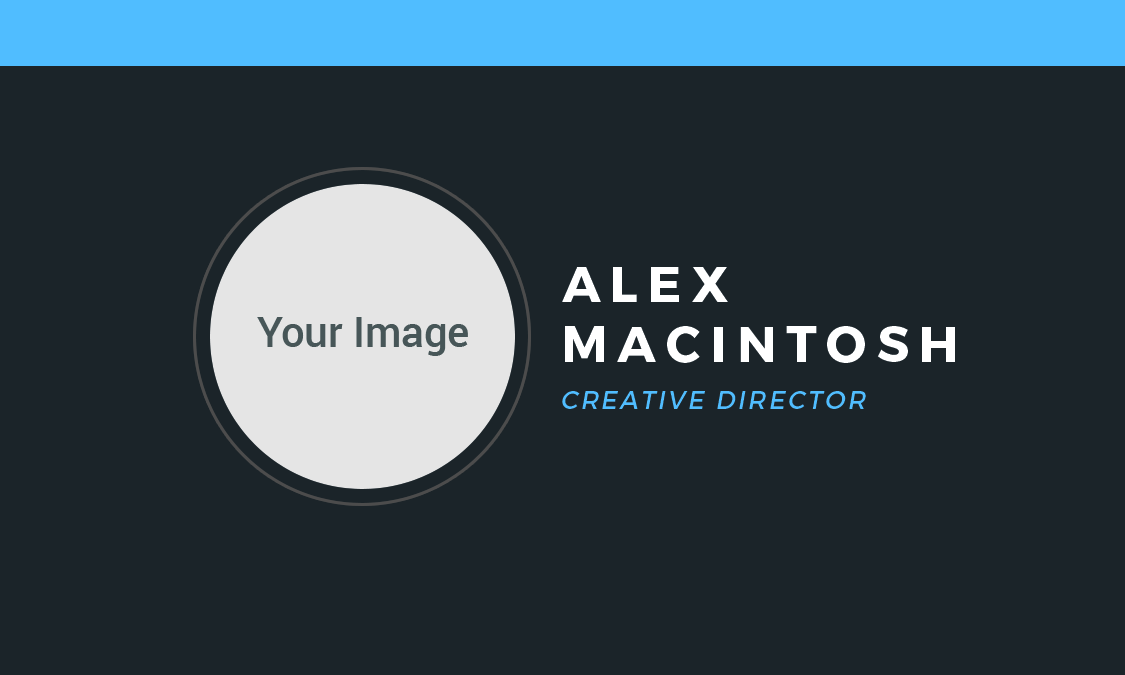
<style>
.page{position:relative;width:1125px;height:675px;background:#1b2429}
.page>*{position:absolute;margin:0}
.t1{font:50px "Montserrat-Bold";letter-spacing:0.2em;color:#ffffff;text-transform:uppercase}
.t2{font:25px "Montserrat-Regular";letter-spacing:0.1em;color:#50bdff;text-transform:uppercase;font-style:italic}
</style>
<div class="page">
<p class="t1" style="left:562px;top:267px;width:393px;height:96px">AleX<br>Macintosh</p>
<p class="t2" style="left:562px;top:391px;width:304px;height:18px">Creative Director</p>
</div>
